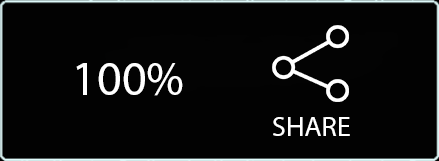
<style>
.page{position:relative;width:439px;height:161px;background:#020202}
.page>*{position:absolute;margin:0}
.t1{font:48px "MyriadPro-Regular";color:#ffffff}
.t2{font:28.2px "MyriadPro-Regular";color:#ffffff}
</style>
<div class="page">
<p class="t1" style="left:76px;top:63px;width:107px;height:33px">100%</p>
<p class="t2" style="left:273px;top:117px;width:77px;height:19px">SHARE</p>
</div>
